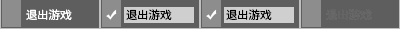
<style>
.page{position:relative;width:400px;height:29px;background:#5e5e5e}
.page>*{position:absolute;margin:0}
.t1{font:11.4px "SourceHanSansSC-Normal";color:#ffffff}
.t2{font:11.4px "SourceHanSansSC-Normal";color:#000000}
.t3{font:11.4px "SourceHanSansSC-Normal";color:#646464}
</style>
<div class="page">
<p class="t1" style="left:26px;top:9px;width:46px;height:11px">退出游戏</p>
<p class="t2" style="left:126px;top:9px;width:46px;height:11px">退出游戏</p>
<p class="t2" style="left:226px;top:9px;width:46px;height:11px">退出游戏</p>
<p class="t3" style="left:326px;top:9px;width:46px;height:11px">退出游戏</p>
</div>
